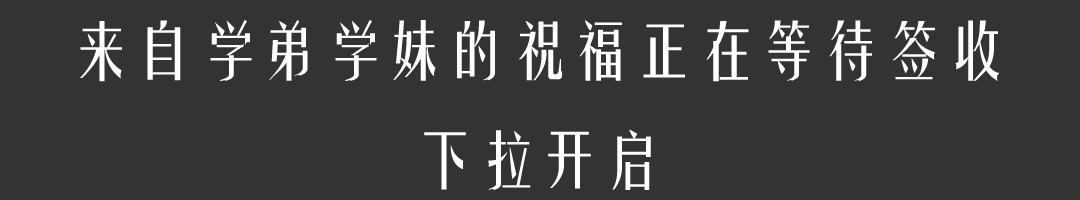
<style>
.page{position:relative;width:1080px;height:200px;background:#333333}
.page>*{position:absolute;margin:0}
.t1{font:62.5px "FZYTK--GBK1-0";color:#ffffff}
</style>
<div class="page">
<p class="t1" style="left:80px;top:20px;width:920px;height:170px;text-align:center">来自学弟学妹的祝福正在等待签收<br>下拉开启</p>
</div>
